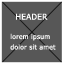
<style>
.page{position:relative;width:64px;height:64px;background:#575757}
.page>*{position:absolute;margin:0}
.t1{font:8px "Tahoma";letter-spacing:0.05em;color:#ffffff}
.t2{font:6.7px/10.5px "Tahoma";letter-spacing:0.05em;color:#ffffff}
</style>
<div class="page">
<p class="t1" style="left:16px;top:13px;width:32px;height:7px">HEADER</p>
<p class="t2" style="left:10px;top:33px;width:46px;height:17px">lorem ipsum<br>dolor sit amet</p>
</div>
